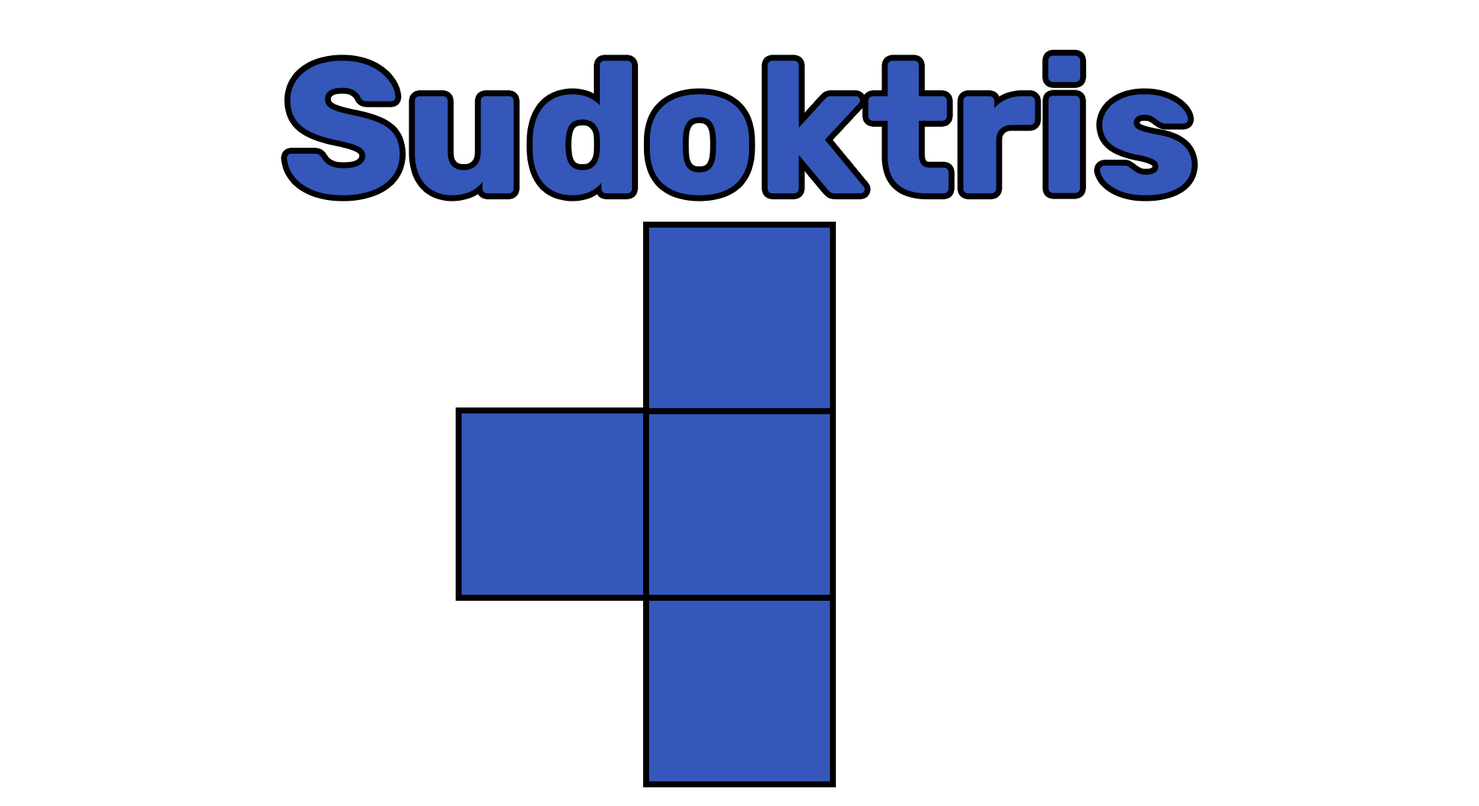
<style>
.page{position:relative;width:1479px;height:806px;background:#ffffff}
.page>*{position:absolute;margin:0}
.t1{font:186.7px "RubikRoman-Bold";color:#3457b9}
</style>
<div class="page">
<p class="t1" style="left:287px;top:55px;width:905px;height:141px">Sudoktris</p>
</div>
